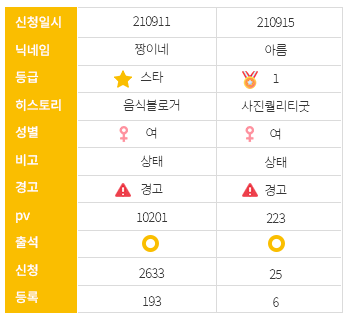
<style>
.page{position:relative;width:350px;height:321px;background:#ffffff}
.page>*{position:absolute;margin:0}
.t1{font:13px/27.5px "NotoSansKR-Medium";letter-spacing:-0.02em;color:#ffffff}
.t2{font:13px/28px "NotoSansKR-Thin";letter-spacing:-0.04em;color:#363636}
</style>
<div class="page">
<p class="t1" style="left:15px;top:16px;width:46px;height:288px">신청일시<br>닉네임<br>등급<br>히스토리<br>성별<br>비고<br>경고<br>pv<br>출석<br>신청<br>등록</p>
<p class="t2" style="left:123px;top:16px;width:57px;height:290px;text-align:center">210911<br>짱이네<br>스타<br>음식블로거<br>여<br>상태<br>경고<br>10201<br><br>2633<br>193</p>
<p class="t2" style="left:241px;top:17px;width:69px;height:290px;text-align:center">210915<br>아름<br>1<br>사진퀄리티굿<br>여<br>상태<br>경고<br>223<br><br>25<br>6</p>
</div>
